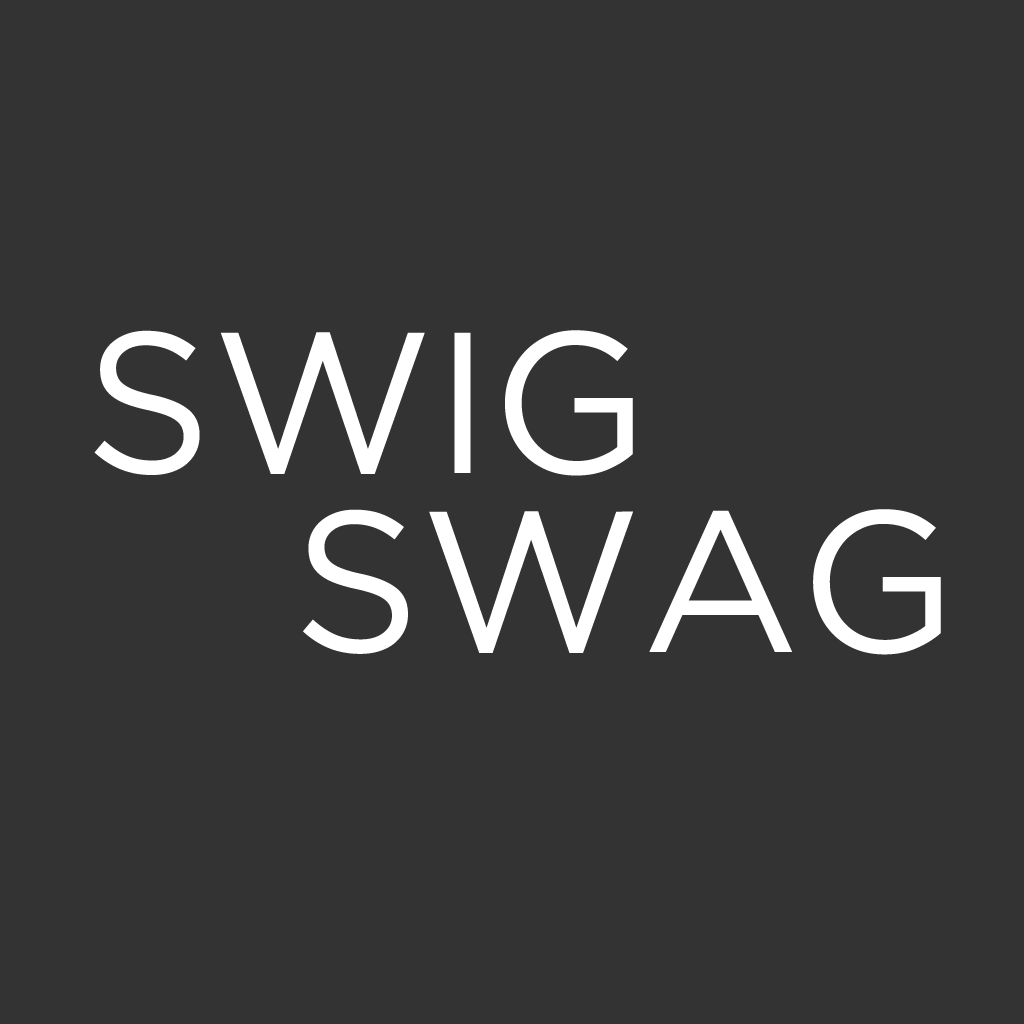
<style>
.page{position:relative;width:1024px;height:1024px;background:#333333}
.page>*{position:absolute;margin:0}
.t1{font:200px "GothamBook";color:#ffffff}
</style>
<div class="page">
<p class="t1" style="left:94px;top:330px;width:539px;height:146px">SWIG</p>
<p class="t1" style="left:303px;top:509px;width:638px;height:146px">SWAG</p>
</div>
